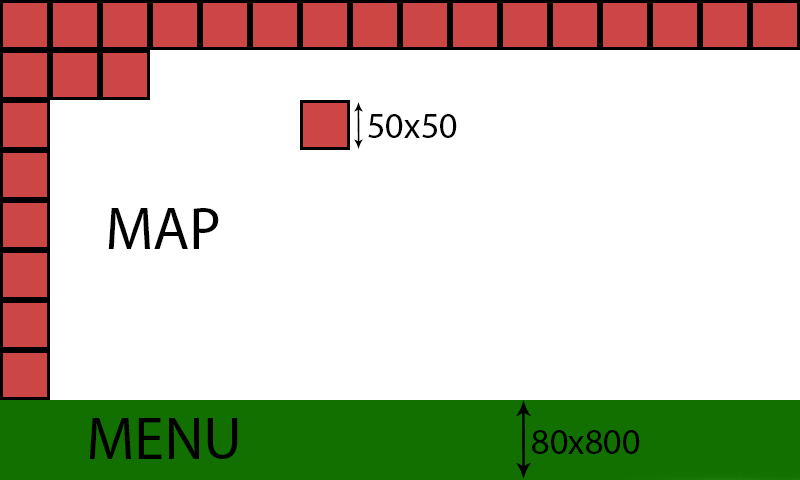
<style>
.page{position:relative;width:800px;height:480px;background:#ffffff}
.page>*{position:absolute;margin:0}
.t1{font:36px "MyriadPro-Regular";color:#000000}
.t2{font:60px "MyriadPro-Regular";color:#000000}
</style>
<div class="page">
<p class="t1" style="left:368px;top:114px;width:89px;height:24px">50x50</p>
<p class="t2" style="left:108px;top:208px;width:111px;height:41px">MAP</p>
<p class="t2" style="left:89px;top:418px;width:149px;height:41px">MENU</p>
<p class="t1" style="left:532px;top:430px;width:108px;height:24px">80x800</p>
</div>
